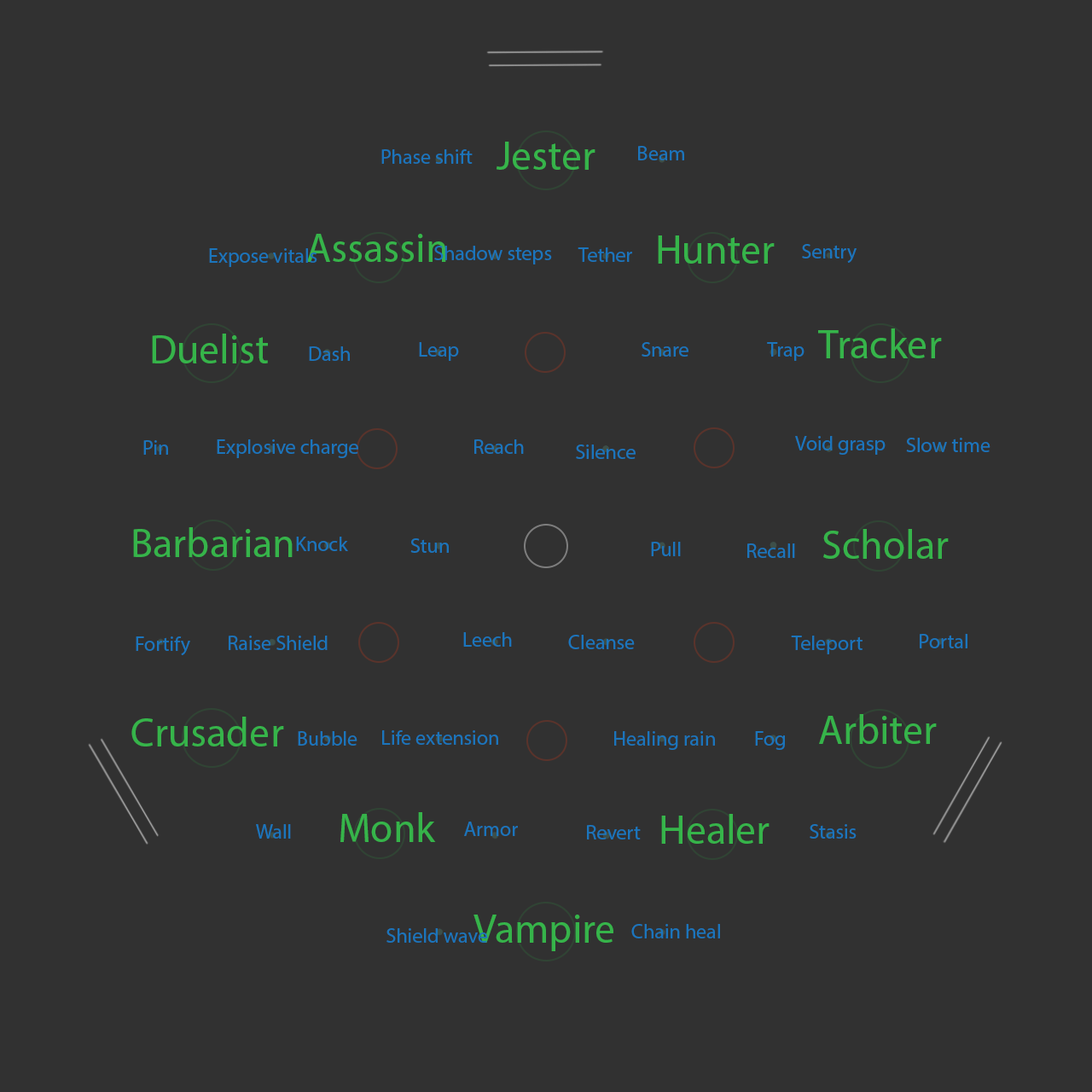
<style>
.page{position:relative;width:1092px;height:1092px;background:#313131}
.page>*{position:absolute;margin:0}
.t1{font:20.5px "MyriadPro-Regular";color:#1b75bc}
.t2{font:40.9px "MyriadPro-Regular";color:#36b44a}
</style>
<div class="page">
<p class="t1" style="left:381px;top:149px;width:92px;height:15px">Phase shift</p>
<p class="t2" style="left:497px;top:142px;width:98px;height:28px">Jester</p>
<p class="t1" style="left:638px;top:146px;width:46px;height:14px">Beam</p>
<p class="t2" style="left:307px;top:234px;width:139px;height:28px">Assassin</p>
<p class="t1" style="left:434px;top:246px;width:118px;height:18px">Shadow steps</p>
<p class="t2" style="left:658px;top:235px;width:117px;height:29px">Hunter</p>
<p class="t1" style="left:802px;top:244px;width:55px;height:19px">Sentry</p>
<p class="t1" style="left:209px;top:248px;width:108px;height:19px">Expose vitals</p>
<p class="t1" style="left:578px;top:247px;width:54px;height:15px">Tether</p>
<p class="t2" style="left:818px;top:328px;width:124px;height:30px">Tracker</p>
<p class="t2" style="left:152px;top:334px;width:116px;height:29px">Duelist</p>
<p class="t1" style="left:309px;top:346px;width:41px;height:15px">Dash</p>
<p class="t1" style="left:419px;top:342px;width:40px;height:19px">Leap</p>
<p class="t1" style="left:642px;top:342px;width:46px;height:15px">Snare</p>
<p class="t1" style="left:767px;top:342px;width:37px;height:19px">Trap</p>
<p class="t1" style="left:795px;top:436px;width:91px;height:19px">Void grasp</p>
<p class="t1" style="left:906px;top:438px;width:84px;height:14px">Slow time</p>
<p class="t1" style="left:143px;top:440px;width:25px;height:15px">Pin</p>
<p class="t1" style="left:217px;top:439px;width:141px;height:19px">Explosive charge</p>
<p class="t1" style="left:474px;top:439px;width:50px;height:15px">Reach</p>
<p class="t1" style="left:576px;top:444px;width:60px;height:15px">Silence</p>
<p class="t2" style="left:133px;top:527px;width:160px;height:30px">Barbarian</p>
<p class="t2" style="left:823px;top:529px;width:126px;height:30px">Scholar</p>
<p class="t1" style="left:296px;top:537px;width:52px;height:14px">Knock</p>
<p class="t1" style="left:410px;top:538px;width:39px;height:15px">Stun</p>
<p class="t1" style="left:651px;top:542px;width:30px;height:14px">Pull</p>
<p class="t1" style="left:747px;top:543px;width:48px;height:15px">Recall</p>
<p class="t1" style="left:136px;top:636px;width:54px;height:19px">Fortify</p>
<p class="t1" style="left:229px;top:636px;width:99px;height:14px">Raise Shield</p>
<p class="t1" style="left:463px;top:632px;width:49px;height:15px">Leech</p>
<p class="t1" style="left:568px;top:635px;width:67px;height:14px">Cleanse</p>
<p class="t1" style="left:791px;top:636px;width:71px;height:18px">Teleport</p>
<p class="t1" style="left:920px;top:634px;width:47px;height:14px">Portal</p>
<p class="t2" style="left:131px;top:717px;width:153px;height:29px">Crusader</p>
<p class="t2" style="left:819px;top:714px;width:118px;height:30px">Arbiter</p>
<p class="t1" style="left:298px;top:731px;width:59px;height:15px">Bubble</p>
<p class="t1" style="left:382px;top:730px;width:116px;height:15px">Life extension</p>
<p class="t1" style="left:614px;top:731px;width:101px;height:19px">Healing rain</p>
<p class="t1" style="left:755px;top:731px;width:30px;height:19px">Fog</p>
<p class="t2" style="left:340px;top:812px;width:96px;height:30px">Monk</p>
<p class="t1" style="left:464px;top:822px;width:54px;height:14px">Armor</p>
<p class="t2" style="left:661px;top:814px;width:109px;height:30px">Healer</p>
<p class="t1" style="left:256px;top:824px;width:35px;height:15px">Wall</p>
<p class="t1" style="left:587px;top:825px;width:54px;height:14px">Revert</p>
<p class="t1" style="left:810px;top:824px;width:47px;height:15px">Stasis</p>
<p class="t2" style="left:473px;top:915px;width:140px;height:36px">Vampire</p>
<p class="t1" style="left:386px;top:928px;width:102px;height:15px">Shield wave</p>
<p class="t1" style="left:631px;top:924px;width:89px;height:14px">Chain heal</p>
</div>
